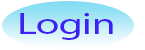
<style>
.page{position:relative;width:145px;height:50px;background:#ffffff}
.page>*{position:absolute;margin:0}
.t1{font:31px "MyriadPro-Regular";color:#3e20f2;scale:1.36 1}
</style>
<div class="page">
<p class="t1" style="left:20px;top:13px;width:93px;height:27px">Login</p>
</div>
